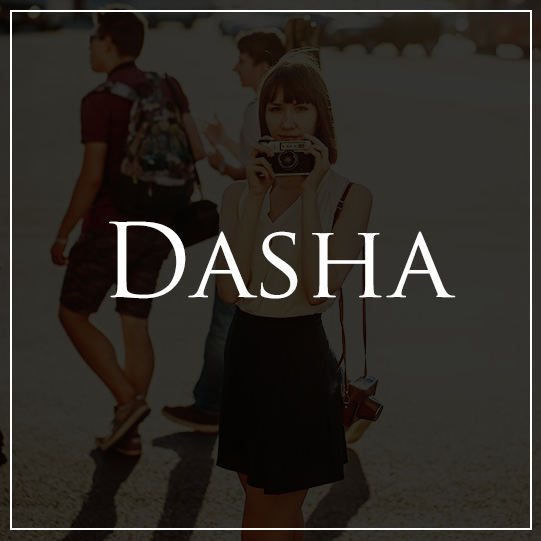
<style>
.page{position:relative;width:541px;height:541px}
.page>*{position:absolute;margin:0}
.t1{font:100px "TrajanPro-Regular";color:#ffffff}
</style>
<div class="page">
<p class="t1" style="left:109px;top:221px;width:347px;height:78px">Dasha</p>
</div>
